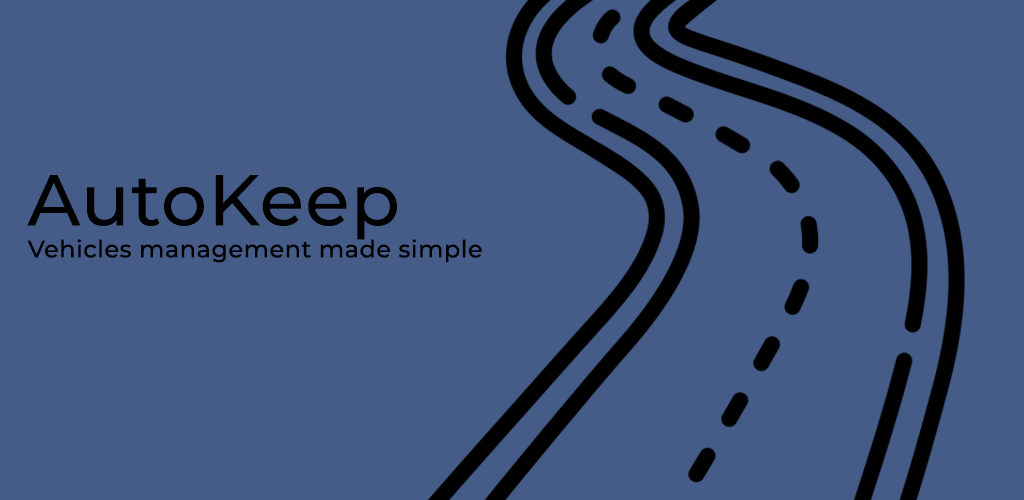
<style>
.page{position:relative;width:1024px;height:500px;background:#465c88}
.page>*{position:absolute;margin:0}
.t1{font:72px "Montserrat-Medium";letter-spacing:0.02em;color:#000000}
.t2{font:24px "Montserrat-Medium";letter-spacing:0.02em;color:#000000}
</style>
<div class="page">
<p class="t1" style="left:27px;top:175px;width:370px;height:65px">AutoKeep</p>
<p class="t2" style="left:27px;top:239px;width:455px;height:24px">Vehicles management made simple</p>
</div>
